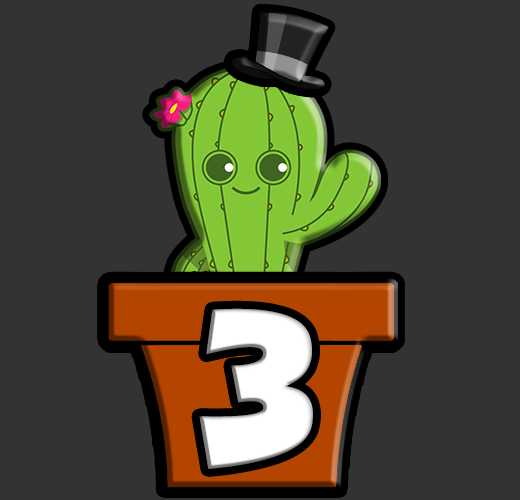
<style>
.page{position:relative;width:520px;height:500px;background:#333333}
.page>*{position:absolute;margin:0}
.t1{font:215.4px "Funhouse";color:#ffffff}
</style>
<div class="page">
<p class="t1" style="left:199px;top:308px;width:114px;height:161px">3</p>
</div>
